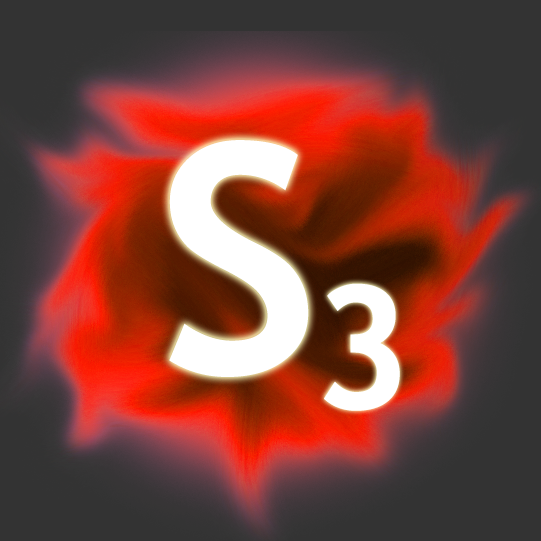
<style>
.page{position:relative;width:541px;height:541px;background:#333333}
.page>*{position:absolute;margin:0}
.t1{font:320px "TrebuchetMS-Bold";color:#ffffff}
.t2{font:172px "TrebuchetMS-Bold";color:#ffffff}
</style>
<div class="page">
<p class="t1" style="left:169px;top:140px;width:140px;height:237px">S</p>
<p class="t2" style="left:324px;top:283px;width:76px;height:128px">3</p>
</div>
